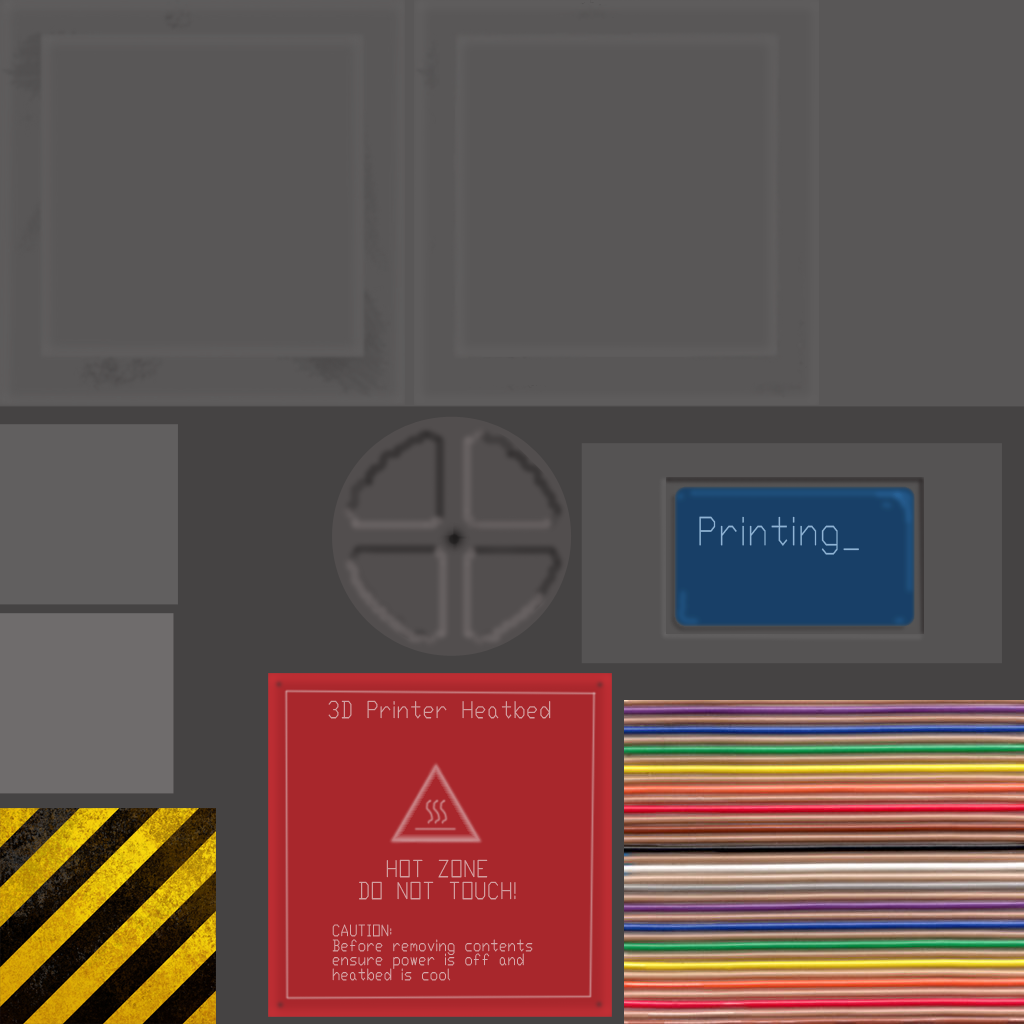
<style>
.page{position:relative;width:1024px;height:1024px;background:#595757}
.page>*{position:absolute;margin:0}
.t1{font:39px "Txt_IV25";color:#8fb3d4;scale:0.77 1}
.t2{font:23.4px "Txt_IV25";color:#d5a8a9;scale:0.77 1}
.t3{font:15.6px "Txt_IV25";color:#d5a8a9;scale:0.77 1}
</style>
<div class="page">
<p class="t1" style="left:699px;top:516px;width:160px;height:39px">Printing_</p>
<p class="t2" style="left:328px;top:700px;width:223px;height:19px">3D Printer Heatbed</p>
<p class="t2" style="left:359px;top:859px;width:157px;height:41px;text-align:center">HOT ZONE<br>DO NOT TOUCH!</p>
<p class="t3" style="left:332px;top:924px;width:201px;height:57px">CAUTION:<br>Before removing contents ensure power is off and heatbed is cool</p>
</div>
